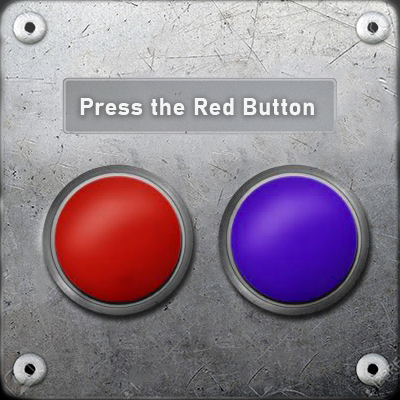
<style>
.page{position:relative;width:400px;height:400px}
.page>*{position:absolute;margin:0}
.t1{font:24px "Bahnschrift-Bold";letter-spacing:0.02em;color:#ffffff}
</style>
<div class="page">
<p class="t1" style="left:80px;top:98px;width:234px;height:18px;opacity:0.87">Press the Red Button</p>
</div>
